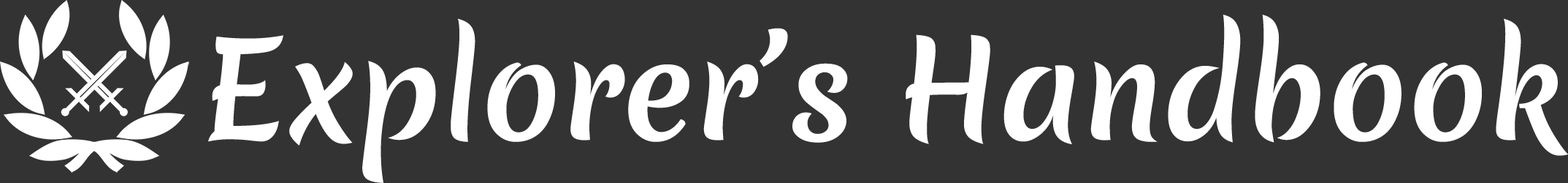
<style>
.page{position:relative;width:1568px;height:183px;background:#333333}
.page>*{position:absolute;margin:0}
.t1{font:130.4px "MeriendaOne-Regular";color:#ffffff}
</style>
<div class="page">
<p class="t1" style="left:208px;top:15px;width:1360px;height:168px">Explorer’s Handbook</p>
</div>
